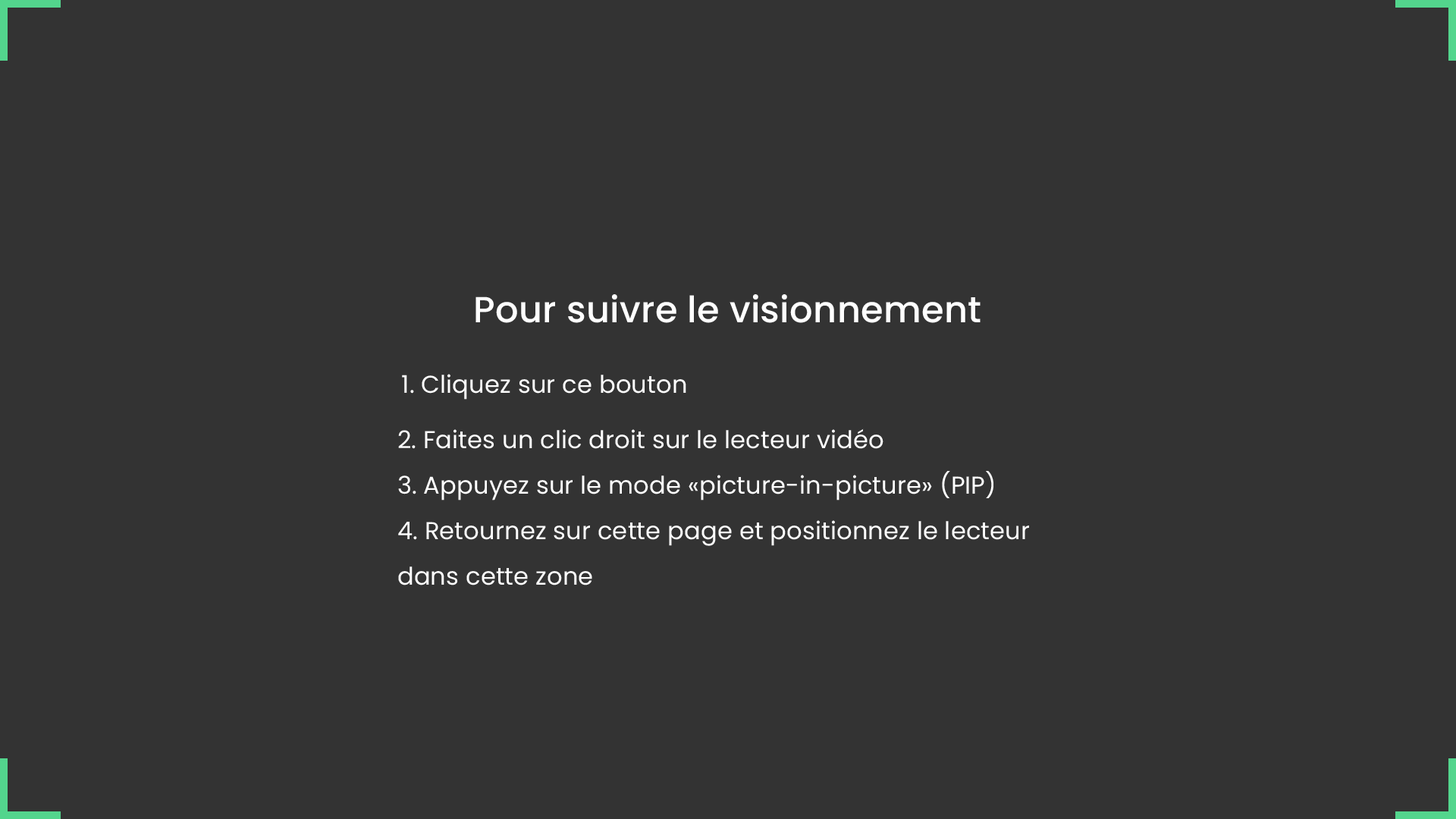
<style>
.page{position:relative;width:1456px;height:819px;background:#333333}
.page>*{position:absolute;margin:0}
.t1{font:36.4px "Poppins-Medium";letter-spacing:0.005em;color:#ffffff}
.t2{font:24.4px "Poppins-Regular";letter-spacing:0.005em;color:#ffffff}
.t3{font:24.4px/45.5px "Poppins-Regular";letter-spacing:0.005em;color:#ffffff}
</style>
<div class="page">
<p class="t1" style="left:475px;top:294px;width:506px;height:29px">Pour suivre le visionnement</p>
<p class="t2" style="left:402px;top:374px;width:284px;height:26px">1. Cliquez sur ce bouton</p>
<p class="t3" style="left:398px;top:428px;width:631px;height:157px">2. Faites un clic droit sur le lecteur vidéo<br>3. Appuyez sur le mode «picture-in-picture» (PIP)<br>4. Retournez sur cette page et positionnez le lecteur dans cette zone</p>
</div>
